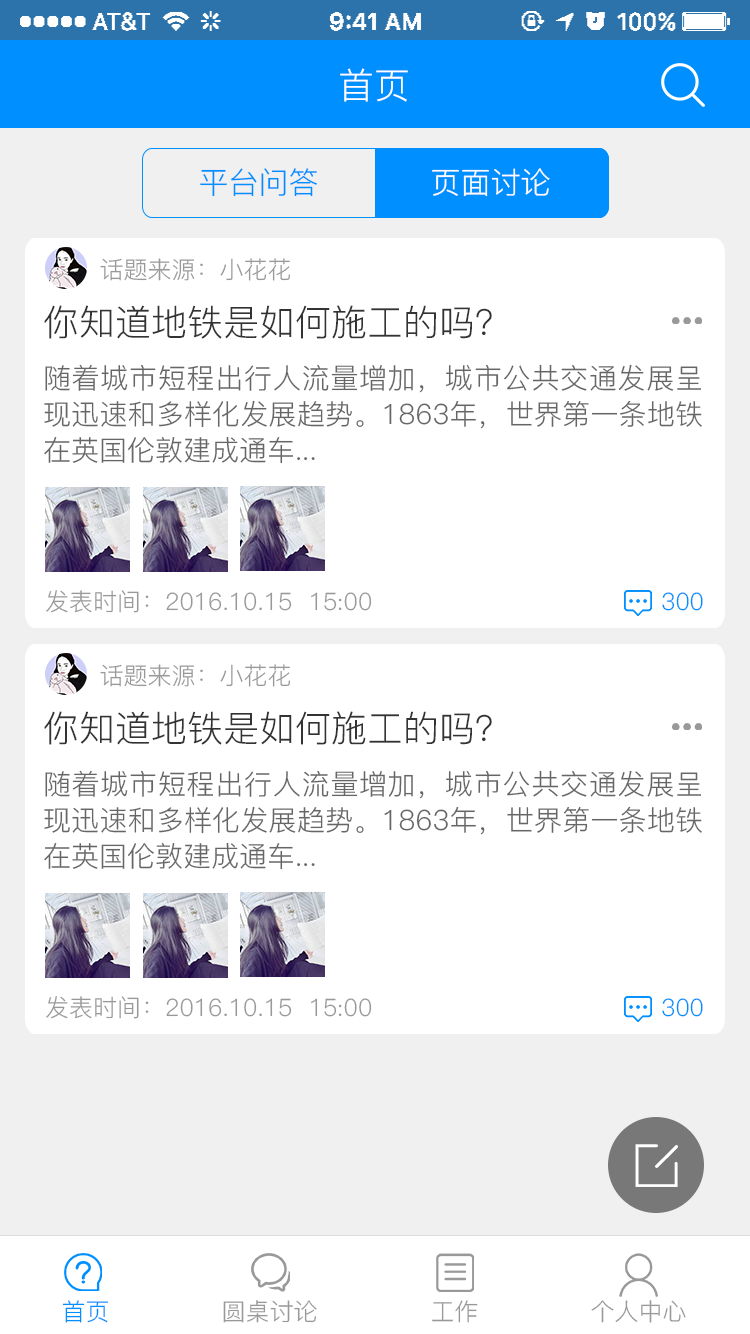
<style>
.page{position:relative;width:750px;height:1334px;background:#ffffff}
.page>*{position:absolute;margin:0}
.t1{font:36px "PingFang-SC-Regular";color:#ffffff}
.t2{font:30px "PingFang-SC-Regular";color:#008fff}
.t3{font:30px "PingFang-SC-Regular";color:#ffffff}
.t4{font:24px "PingFang-SC-Regular";color:#999999}
.t5{font:36px "PingFang-SC-Regular";color:#333333}
.t6{font:28px/36px "PingFang-SC-Regular";color:#666666}
.t7{font:24px "PingFang-SC-Regular";color:#008fff}
</style>
<div class="page">
<p class="t1" style="left:340px;top:68px;width:68px;height:34px">首页</p>
<p class="t2" style="left:200px;top:168px;width:117px;height:29px">平台问答</p>
<p class="t3" style="left:432px;top:168px;width:118px;height:29px">页面讨论</p>
<p class="t4" style="left:100px;top:258px;width:191px;height:23px">话题来源：小花花</p>
<p class="t5" style="left:44px;top:305px;width:448px;height:34px">你知道地铁是如何施工的吗？</p>
<p class="t6" style="left:44px;top:364px;width:658px;height:100px;text-align:justify">随着城市短程出行人流量增加，城市公共交通发展呈现迅速和多样化发展趋势。1863年，世界第一条地铁在英国伦敦建成通车...</p>
<p class="t4" style="left:46px;top:590px;width:326px;height:23px">发表时间：2016.10.15  15:00</p>
<p class="t7" style="left:662px;top:592px;width:41px;height:19px">300</p>
<p class="t4" style="left:100px;top:664px;width:191px;height:23px">话题来源：小花花</p>
<p class="t5" style="left:44px;top:711px;width:448px;height:34px">你知道地铁是如何施工的吗？</p>
<p class="t6" style="left:44px;top:770px;width:658px;height:100px;text-align:justify">随着城市短程出行人流量增加，城市公共交通发展呈现迅速和多样化发展趋势。1863年，世界第一条地铁在英国伦敦建成通车...</p>
<p class="t4" style="left:46px;top:996px;width:326px;height:23px">发表时间：2016.10.15  15:00</p>
<p class="t7" style="left:662px;top:998px;width:41px;height:19px">300</p>
<p class="t7" style="left:62px;top:1300px;width:46px;height:23px">首页</p>
<p class="t4" style="left:223px;top:1300px;width:94px;height:23px">圆桌讨论</p>
<p class="t4" style="left:432px;top:1300px;width:46px;height:23px">工作</p>
<p class="t4" style="left:591px;top:1300px;width:95px;height:23px">个人中心</p>
</div>
